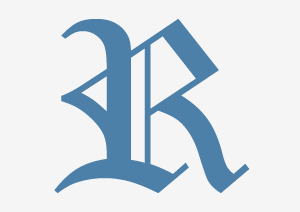
<style>
.page{position:relative;width:300px;height:212px;background:#f5f5f5}
.page>*{position:absolute;margin:0}
.t1{font:240px "OldEnglishTextMT";color:#4c80a8}
</style>
<div class="page">
<p class="t1" style="left:54px;top:19px;width:196px;height:174px">R</p>
</div>
